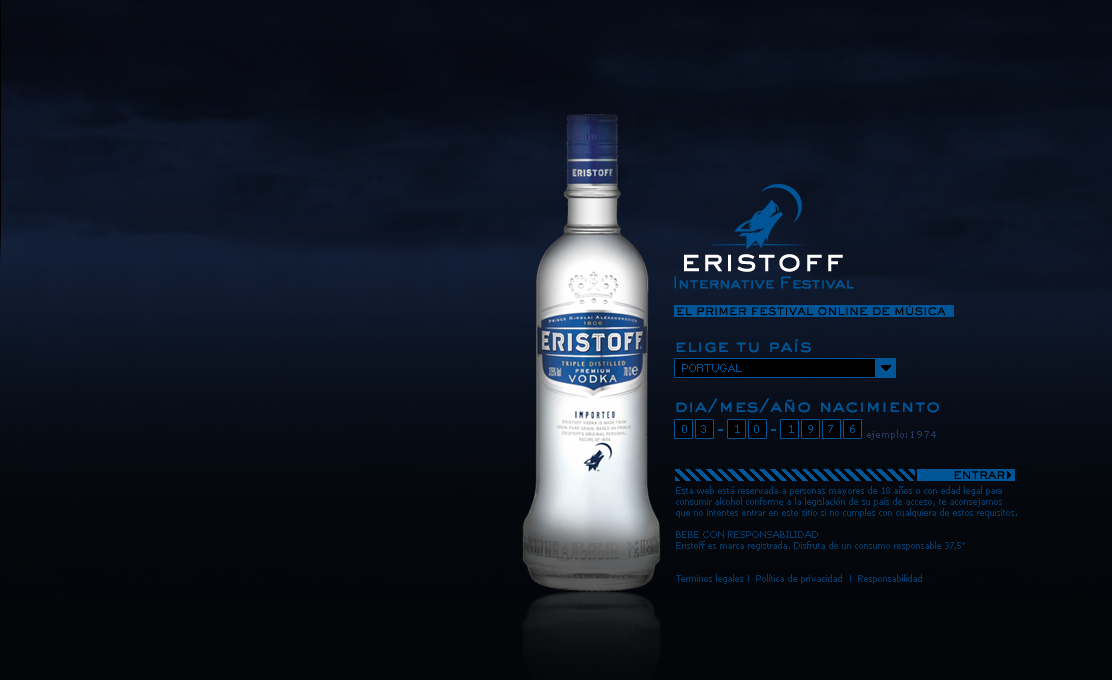
<style>
.page{position:relative;width:1112px;height:680px}
.page>*{position:absolute;margin:0}
.t1{font:10px "SackersGothicStd-Medium";color:#000000;text-transform:uppercase;font-weight:bold}
.t2{font:18px "SackersGothicStd-Medium";color:#005596}
.t3{font:8px "px_sans_nouveaux";color:#005596}
.t4{font:11px "Verdana";color:#005596}
.t5{font:9px "Verdana";color:#253a5e}
.t6{font:10px "SackersGothicStd-Medium";color:#000000;text-transform:uppercase}
.t7{font:9px/11px "Tahoma";color:#013a67}
.t8{font:9px/11px "ArialMT";color:#013a67}
</style>
<div class="page">
<p class="t1" style="left:677px;top:305px;width:269px;height:11px">El primer festival online de música</p>
<p class="t2" style="left:676px;top:339px;width:135px;height:14px">elige tu país</p>
<p class="t3" style="left:682px;top:364px;width:60px;height:8px">PORTUGAL</p>
<p class="t2" style="left:676px;top:398px;width:263px;height:15px">dia/mes/año nacimiento</p>
<p class="t4" style="left:682px;top:425px;width:24px;height:8px">0   3</p>
<p class="t4" style="left:735px;top:425px;width:24px;height:8px">1   0</p>
<p class="t4" style="left:789px;top:425px;width:66px;height:8px">1   9   7    6</p>
<p class="t5" style="left:867px;top:430px;width:69px;height:10px">ejemplo:1974</p>
<p class="t6" style="left:954px;top:471px;width:51px;height:8px">entrar</p>
<p class="t7" style="left:676px;top:486px;width:341px;height:98px">Esta web está reservada a personas mayores de 18 años o con edad legal para consumir alcohol conforme a la legislación de su país de acceso, te aconsejamos que no intentes entrar en este sitio si no cumples con cualquiera de estos requisitos.<br><br>BEBE CON RESPONSABILIDAD<br>Eristoff es marca registrada. Disfruta de un consumo responsable 37,5°<br><br><br>Terminos legales <span class="t8">I</span>  Política de privacidad  <span class="t8">I</span>  Responsabilidad</p>
</div>
